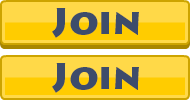
<style>
.page{position:relative;width:190px;height:100px;background:#ffd948}
.page>*{position:absolute;margin:0}
.t1{font:36px "LithosPro-Black";color:#3d4c6b}
</style>
<div class="page">
<p class="t1" style="left:52px;top:8px;width:87px;height:30px">Join</p>
<p class="t1" style="left:52px;top:63px;width:87px;height:30px">Join</p>
</div>
